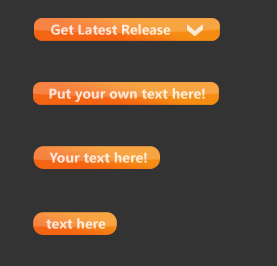
<style>
.page{position:relative;width:277px;height:266px;background:#333333}
.page>*{position:absolute;margin:0}
.t1{font:14.1px "SegoeUI-Bold";color:#fde7d9}
.t2{font:14.1px "SegoeUI-Bold";color:#fde8d9}
.t3{font:14.1px "SegoeUI-Bold";color:#fde9d9}
</style>
<div class="page">
<p class="t1" style="left:51px;top:24px;width:120px;height:11px">Get Latest Release</p>
<p class="t2" style="left:49px;top:88px;width:156px;height:14px">Put your own text here!</p>
<p class="t3" style="left:49px;top:152px;width:98px;height:11px">Your text here!</p>
<p class="t3" style="left:46px;top:218px;width:60px;height:11px">text here</p>
</div>
